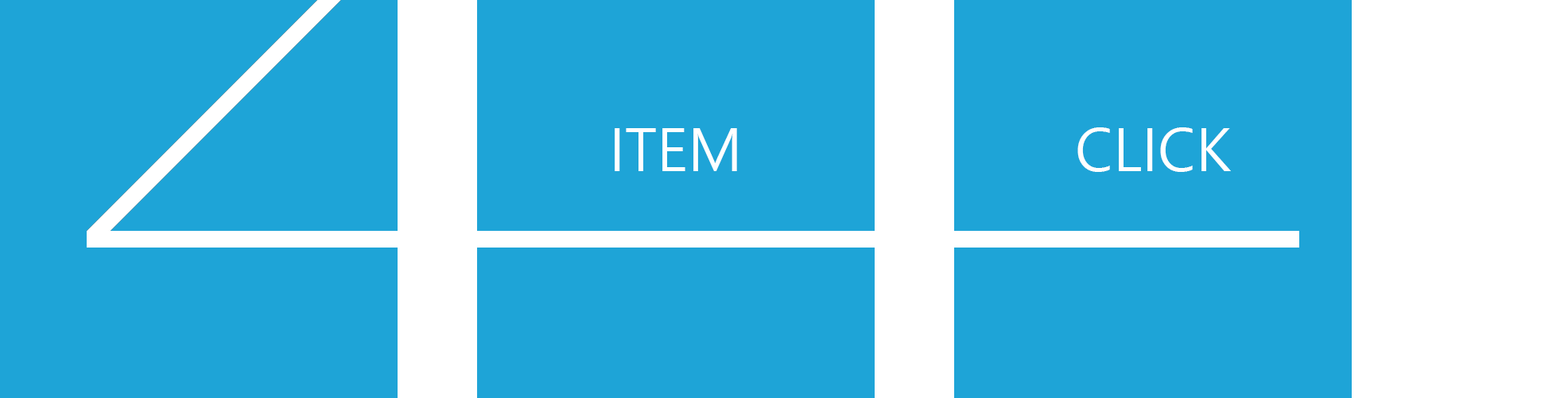
<style>
.page{position:relative;width:1568px;height:398px;background:#1ea4d7}
.page>*{position:absolute;margin:0}
.t1{font:59.6px "MalgunGothic";color:#ffffff;text-transform:uppercase}
</style>
<div class="page">
<p class="t1" style="left:615px;top:128px;width:122px;height:43px">ITEM</p>
<p class="t1" style="left:1077px;top:127px;width:154px;height:45px">click</p>
</div>
